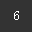
<style>
.page{position:relative;width:32px;height:32px;background:#333333}
.page>*{position:absolute;margin:0}
.t1{font:12px "CenturySchoolbook";letter-spacing:0.06em;color:#ffffff}
</style>
<div class="page">
<p class="t1" style="left:14px;top:11px;width:5px;height:9px">6</p>
</div>
